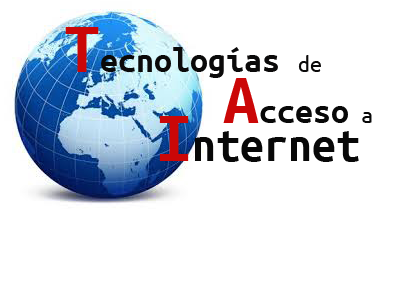
<style>
.page{position:relative;width:400px;height:300px;background:#ffffff}
.page>*{position:absolute;margin:0}
.t1{font:36px "UbuntuMono-Bold";color:#0b0a0a}
.t2{font:72px "UbuntuMono-Bold";color:#cb0707}
.t3{font:24px "UbuntuMono-Regular";color:#0b0a0a}
.t4{font:36px "UbuntuMono-Bold";color:#080808}
.t5{font:24px "UbuntuMono-Regular";color:#080808}
.t6{font:48px "UbuntuMono-Bold";color:#080808}
</style>
<div class="page">
<p class="t1" style="left:65px;top:27px;width:256px;height:51px"><span class="t2">T</span>ecnologías <span class="t3">de</span></p>
<p class="t4" style="left:223px;top:78px;width:149px;height:45px"><span class="t2">A</span>cceso<span class="t5"> a</span></p>
<p class="t6" style="left:159px;top:116px;width:200px;height:46px"><span class="t2">I</span>nternet</p>
</div>
